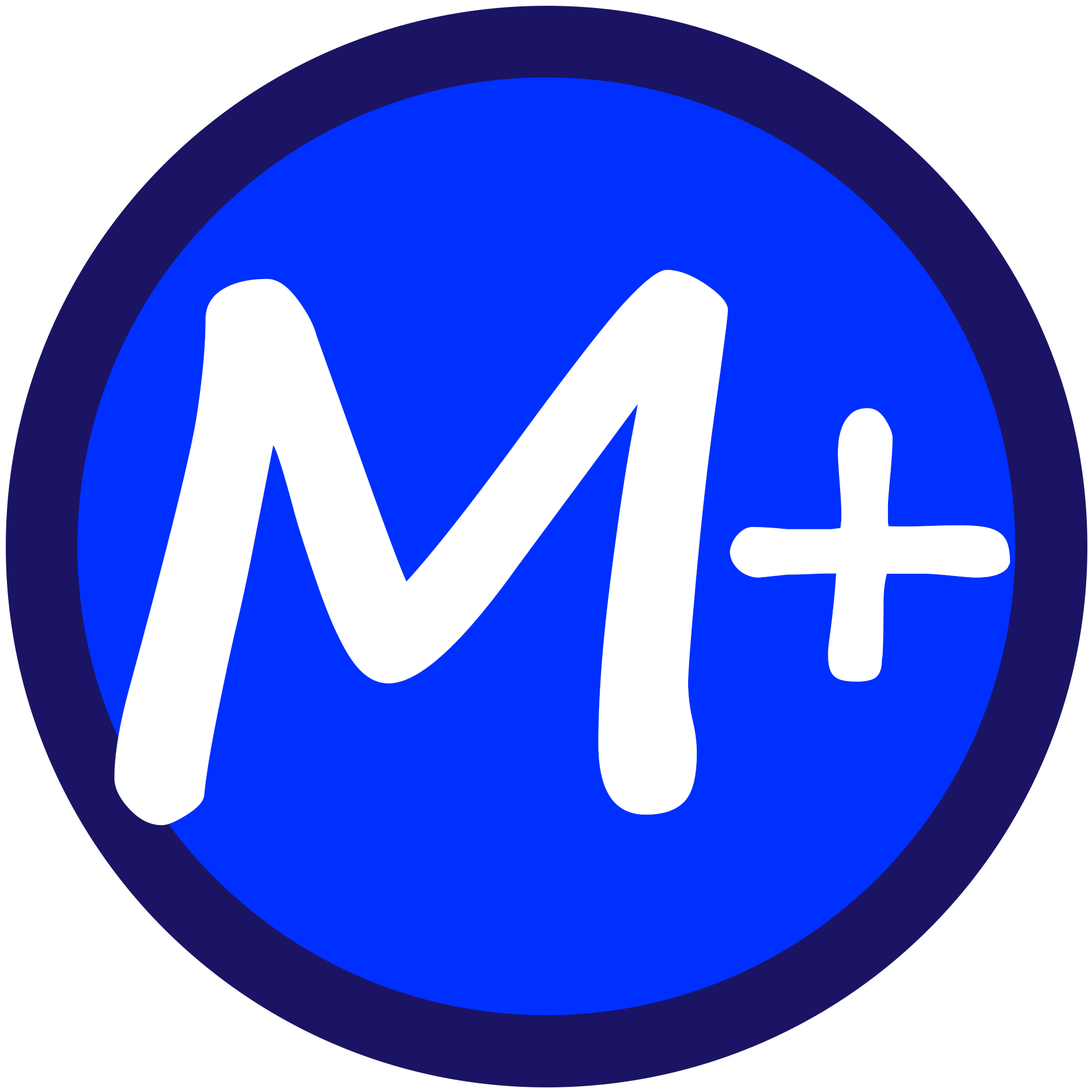
<style>
.page{position:relative;width:1092px;height:1092px;background:#0030ff}
.page>*{position:absolute;margin:0}
.t1{font:740.4px "SegoePrint-Bold";color:#ffffff}
.t2{font:559px "SegoeScript-Bold";color:#ffffff}
</style>
<div class="page">
<p class="t1" style="left:114px;top:270px;width:614px;height:556px">M</p>
<p class="t2" style="left:730px;top:408px;width:280px;height:274px">+</p>
</div>
